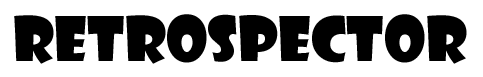
<style>
.page{position:relative;width:483px;height:77px;background:#ffffff}
.page>*{position:absolute;margin:0}
.t1{font:60px "ShowcardGothic-Reg";color:#000000}
</style>
<div class="page">
<p class="t1" style="left:14px;top:14px;width:453px;height:50px">RETROSPECTOR</p>
</div>
